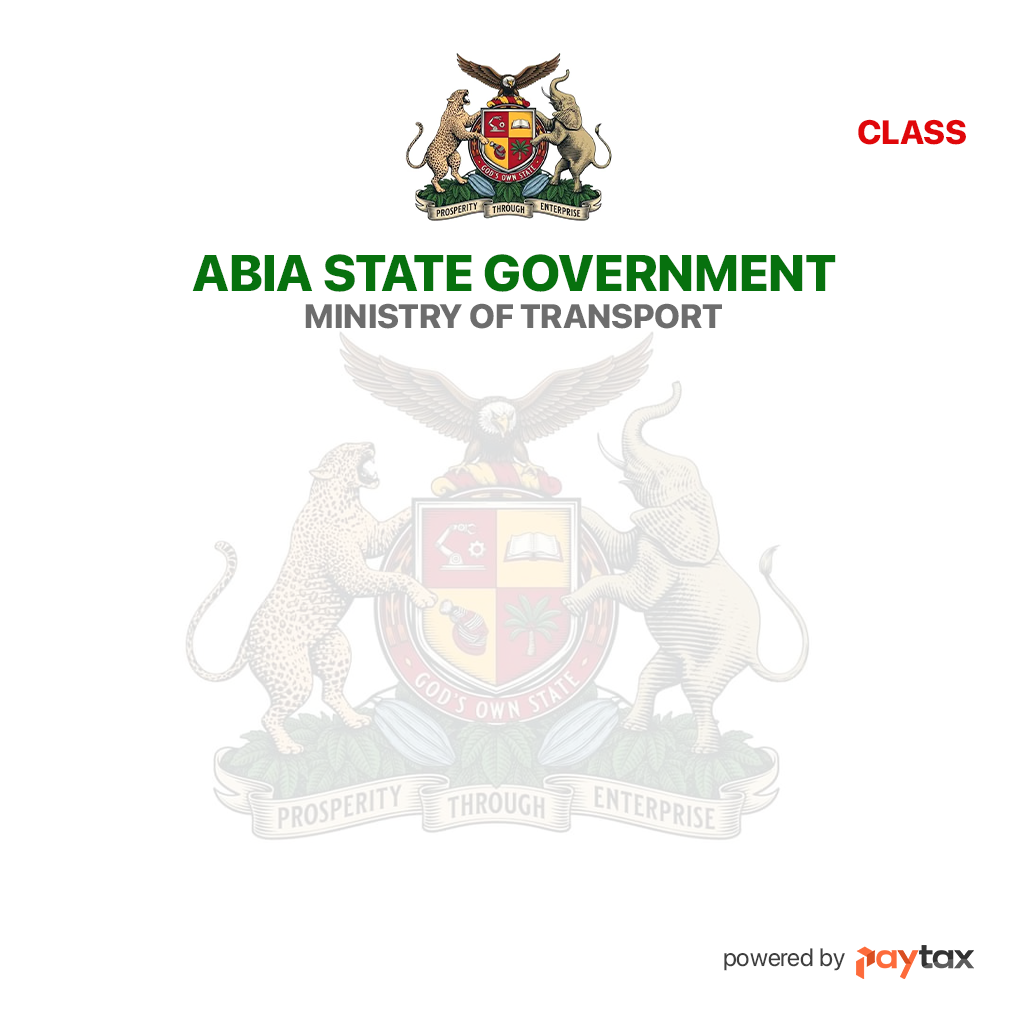
<style>
.page{position:relative;width:1027px;height:1028px;background:#ffffff}
.page>*{position:absolute;margin:0}
.t1{font:33.7px "SFProDisplay-Heavy";letter-spacing:-0.005em;color:#e0070a}
.t2{font:51.2px "SFProDisplay-Heavy";letter-spacing:-0.005em;color:#07710e}
.t3{font:33.8px "SFProDisplay-Heavy";letter-spacing:-0.005em;color:#6d6d6d}
.t4{font:25px "SFProDisplay-Regular";color:#3f3f3f}
</style>
<div class="page">
<p class="t1" style="left:858px;top:119px;width:108px;height:26px">CLASS</p>
<p class="t2" style="left:192px;top:254px;width:644px;height:38px">ABIA STATE GOVERNMENT</p>
<p class="t3" style="left:305px;top:303px;width:417px;height:26px">MINISTRY OF TRANSPORT</p>
<p class="t4" style="left:724px;top:948px;width:121px;height:23px">powered by</p>
</div>
